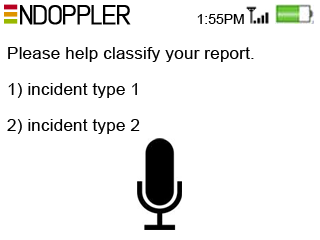
<style>
.page{position:relative;width:320px;height:240px;background:#ffffff}
.page>*{position:absolute;margin:0}
.t1{font:46.4px "Lintel";letter-spacing:-0.05em;color:#000000;font-variant:small-caps;font-weight:bold}
.t2{font:46.4px "Lintel";color:#ffffff;font-variant:small-caps}
.t3{font:24px "ArialMT";color:#000000}
.t4{font:30px "ArialMT";color:#000000}
</style>
<div class="page">
<p class="t1" style="left:20px;top:5px;width:111px;height:20px"><span class="t2">  </span>NDOPPLER</p>
<p class="t3" style="left:197px;top:14px;width:47px;height:10px">1:55PM</p>
<p class="t4" style="left:7px;top:47px;width:247px;height:87px">Please help classify your report.<br>1) incident type 1<br>2) incident type 2</p>
</div>
